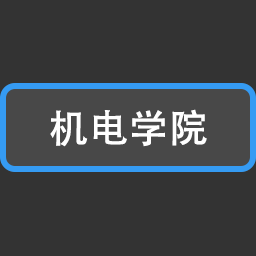
<style>
.page{position:relative;width:256px;height:256px;background:#333333}
.page>*{position:absolute;margin:0}
.t1{font:39px "AdobeHeitiStd-Regular";color:#ffffff;font-weight:bold}
</style>
<div class="page">
<p class="t1" style="left:50px;top:109px;width:157px;height:38px">机电学院</p>
</div>
